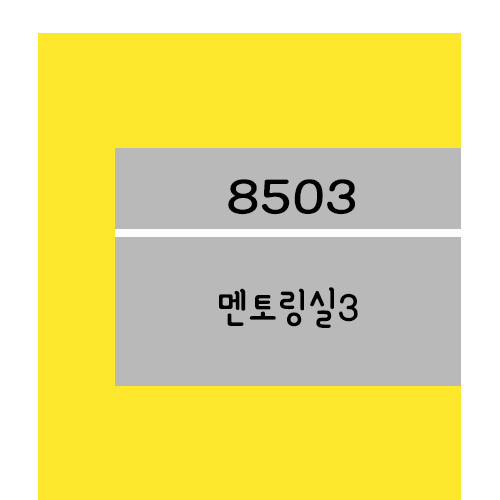
<style>
.page{position:relative;width:500px;height:500px;background:#fee82d}
.page>*{position:absolute;margin:0}
.t1{font:61.2px "YanoljaYacheR";color:#000000;scale:1.18 1}
.t2{font:48px "YanoljaYacheR";color:#000000}
</style>
<div class="page">
<p class="t1" style="left:228px;top:179px;width:127px;height:36px">8503</p>
<p class="t2" style="left:219px;top:287px;width:139px;height:41px">멘토링실3</p>
</div>
